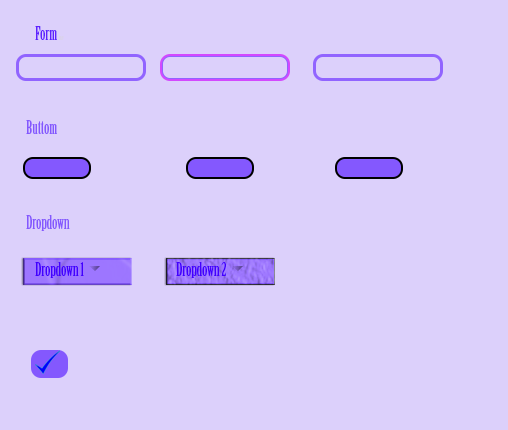
<style>
.page{position:relative;width:508px;height:430px;background:#dcd0fb}
.page>*{position:absolute;margin:0}
.t1{font:18px "BirchStd";color:#5f21ff}
.t2{font:6px "BirchStd";color:#dad2ed}
.t3{font:18px "BirchStd";color:#dcd0fb}
.t4{font:18px "BirchStd";color:#8458fe}
.t5{font:18px "BirchStd";color:#4300ff}
</style>
<div class="page">
<p class="t1" style="left:35px;top:26px;width:29px;height:14px">Form <span class="t2">mv</span></p>
<p class="t3" style="left:26px;top:120px;width:75px;height:16px"><span class="t4">Buttom </span>em Ipsum</p>
<p class="t4" style="left:26px;top:215px;width:85px;height:16px">Dropdown<span class="t3">em Ipsum</span></p>
<p class="t5" style="left:35px;top:262px;width:49px;height:16px">Dropdown 1</p>
<p class="t5" style="left:176px;top:262px;width:50px;height:16px">Dropdown 2</p>
</div>
